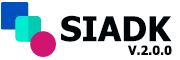
<style>
.page{position:relative;width:180px;height:60px;background:#ffffff}
.page>*{position:absolute;margin:0}
.t1{font:34px "Tahoma-Bold";color:#010508}
.t2{font:12.5px "Tahoma-Bold";color:#010508}
</style>
<div class="page">
<p class="t1" style="left:61px;top:15px;width:111px;height:27px">SIADK</p>
<p class="t2" style="left:128px;top:45px;width:44px;height:10px">V.2.0.0</p>
</div>
